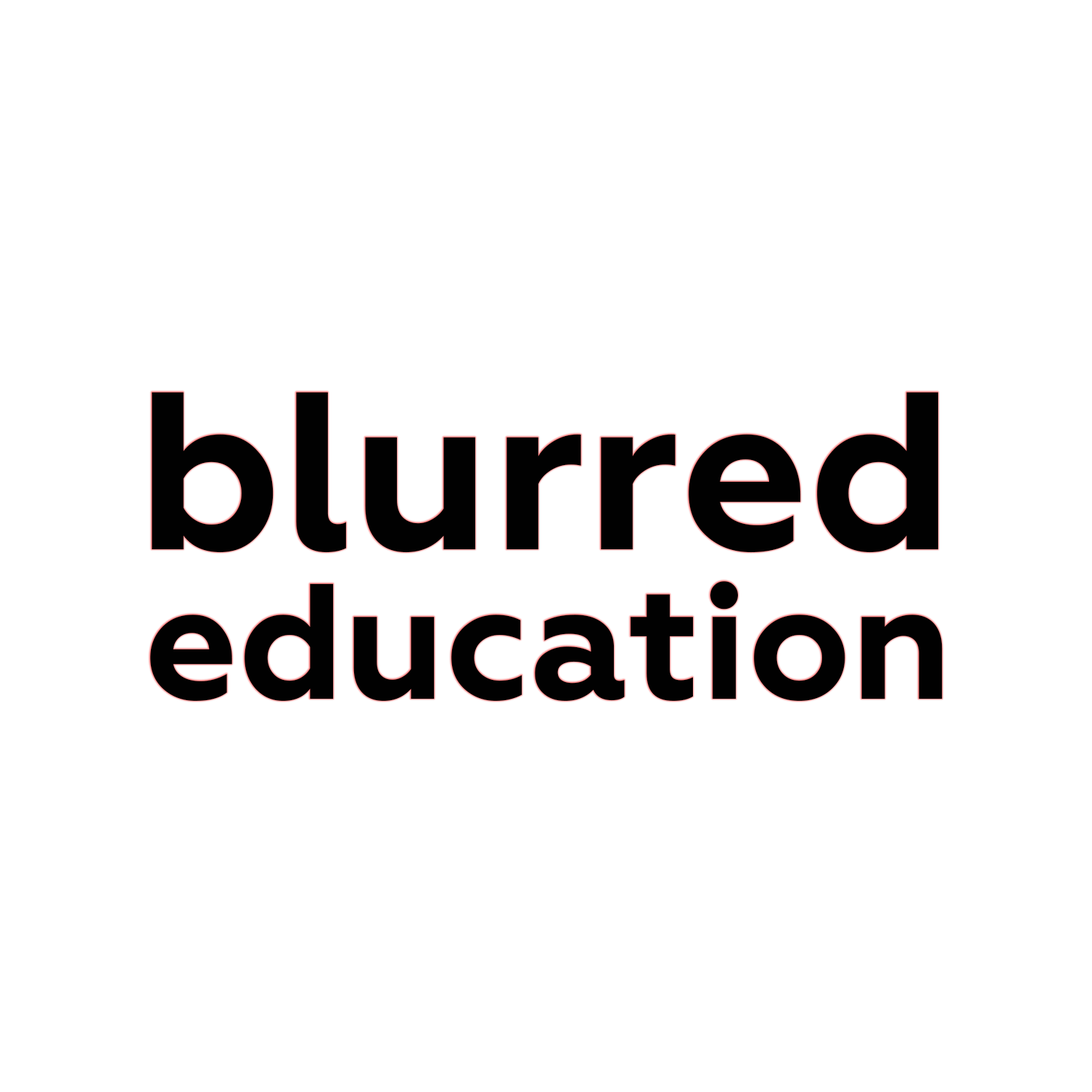
<style>
.page{position:relative;width:1092px;height:1092px;background:#ffffff}
.page>*{position:absolute;margin:0}
.t1{font:224.2px "Geometria-Bold";color:#010101}
.t2{font:164px "Geometria-Bold";color:#010101}
</style>
<div class="page">
<p class="t1" style="left:152px;top:392px;width:786px;height:161px">blurred</p>
<p class="t2" style="left:150px;top:581px;width:793px;height:120px">education</p>
</div>
